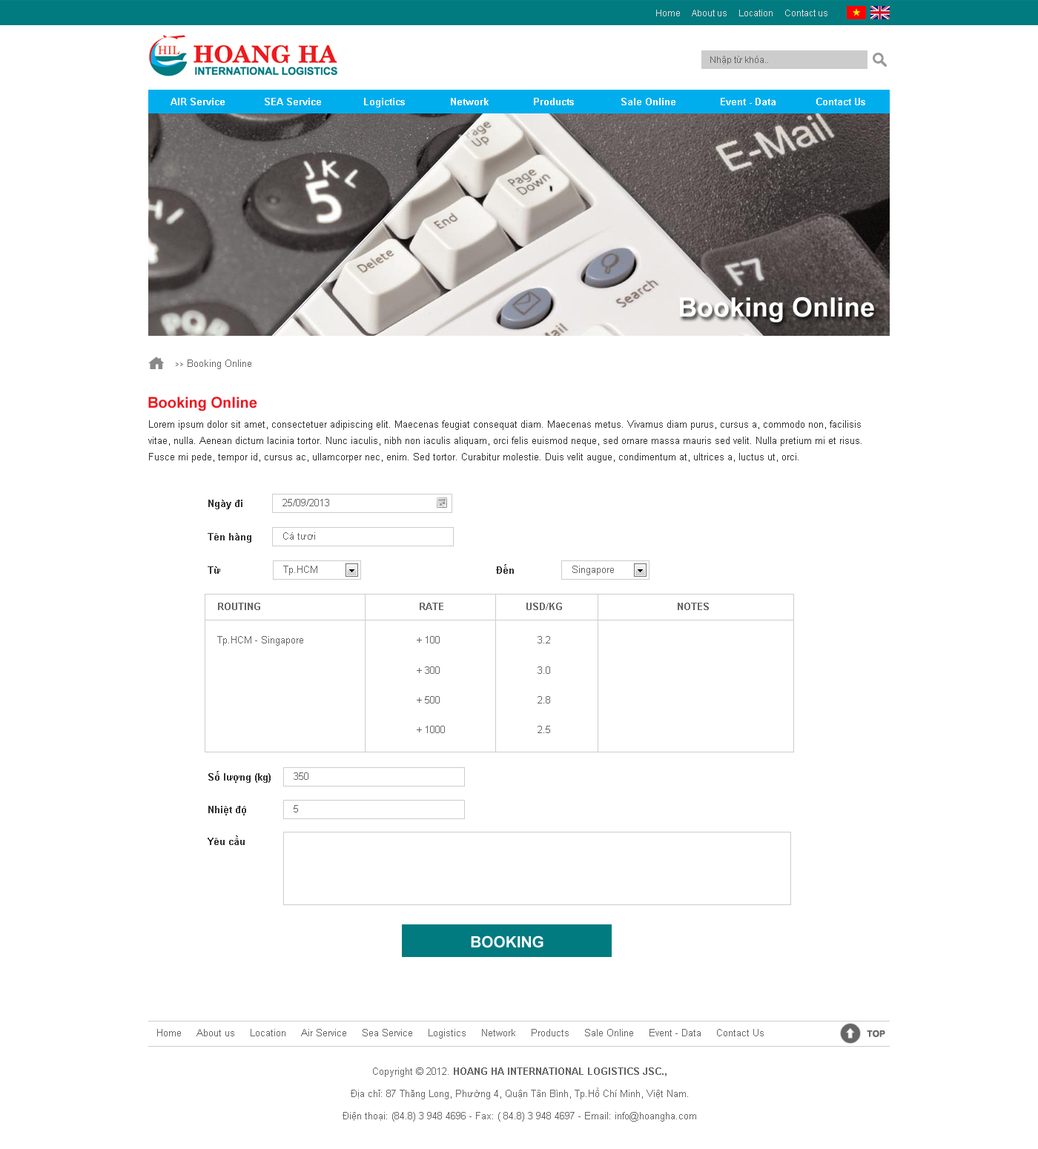
<style>
.page{position:relative;width:1038px;height:1149px;background:#ffffff}
.page>*{position:absolute;margin:0}
.t1{font:8.9px "ArialMT";color:#dddddd}
.t2{font:8.9px "ArialMT";color:#666666}
.t3{font:9.6px "Arial-BoldMT";color:#ffffff}
.t4{font:26.7px "Arial-BoldMT";color:#ffffff}
.t5{font:9.6px "ArialMT";color:#666666}
.t6{font:7.4px "ArialMT";color:#666666}
.t7{font:14.8px "Arial-BoldMT";color:#ed1721}
.t8{font:9.6px/16.3px "ArialMT";color:#333333}
.t9{font:9.6px "Arial-BoldMT";color:#333333}
.t10{font:9.6px "Arial-BoldMT";color:#666666}
.t11{font:15.4px "Arial-BoldMT";color:#ffffff}
.t12{font:9.6px/14.8px "ArialMT";color:#666666}
.t13{font:9.6px/14.8px "Arial-BoldMT";color:#666666}
</style>
<div class="page">
<p class="t1" style="left:656px;top:10px;width:171px;height:6px">Home     About us     Location     Contact us</p>
<p class="t2" style="left:710px;top:56px;width:58px;height:8px">Nhập từ khóa..</p>
<p class="t3" style="left:170px;top:98px;width:55px;height:7px">AIR Service</p>
<p class="t3" style="left:265px;top:98px;width:56px;height:7px">SEA Service</p>
<p class="t3" style="left:364px;top:98px;width:41px;height:9px">Logictics</p>
<p class="t3" style="left:451px;top:98px;width:38px;height:7px">Network</p>
<p class="t3" style="left:534px;top:98px;width:40px;height:7px">Products</p>
<p class="t3" style="left:621px;top:98px;width:54px;height:7px">Sale Online</p>
<p class="t3" style="left:721px;top:98px;width:54px;height:7px">Event - Data</p>
<p class="t3" style="left:816px;top:98px;width:49px;height:7px">Contact Us</p>
<p class="t4" style="left:679px;top:297px;width:195px;height:25px">Booking Online</p>
<p class="t5" style="left:176px;top:360px;width:75px;height:9px"><span class="t6">&gt;&gt;</span> Booking Online</p>
<p class="t7" style="left:148px;top:397px;width:109px;height:14px">Booking Online</p>
<p class="t8" style="left:148px;top:420px;width:713px;height:43px">Lorem ipsum dolor sit amet, consectetuer adipiscing elit. Maecenas feugiat consequat diam. Maecenas metus. Vivamus diam purus, cursus a, commodo non, facilisis vitae, nulla. Aenean dictum lacinia tortor. Nunc iaculis, nibh non iaculis aliquam, orci felis euismod neque, sed ornare massa mauris sed velit. Nulla pretium mi et risus. Fusce mi pede, tempor id, cursus ac, ullamcorper nec, enim. Sed tortor. Curabitur molestie. Duis velit augue, condimentum at, ultrices a, luctus ut, orci.</p>
<p class="t9" style="left:208px;top:500px;width:34px;height:9px">Ngày đi</p>
<p class="t5" style="left:282px;top:499px;width:47px;height:7px">25/09/2013</p>
<p class="t9" style="left:208px;top:533px;width:43px;height:10px">Tên hàng</p>
<p class="t5" style="left:283px;top:532px;width:32px;height:8px">Cá tươi</p>
<p class="t9" style="left:208px;top:566px;width:12px;height:8px">Từ</p>
<p class="t5" style="left:283px;top:566px;width:34px;height:9px">Tp.HCM</p>
<p class="t9" style="left:496px;top:564px;width:18px;height:10px">Đến</p>
<p class="t5" style="left:572px;top:566px;width:42px;height:9px">Singapore</p>
<p class="t10" style="left:218px;top:603px;width:491px;height:7px">ROUTING           RATE        USD/KG       NOTES</p>
<p class="t5" style="left:217px;top:636px;width:333px;height:10px">Tp.HCM - Singapore        + 100    3.2</p>
<p class="t5" style="left:417px;top:666px;width:133px;height:8px">+ 300    3.0</p>
<p class="t5" style="left:417px;top:696px;width:133px;height:7px">+ 500    2.8</p>
<p class="t5" style="left:417px;top:726px;width:133px;height:7px">+ 1000    2.5</p>
<p class="t9" style="left:208px;top:771px;width:63px;height:12px">Số lượng (kg)</p>
<p class="t5" style="left:294px;top:772px;width:14px;height:8px">350</p>
<p class="t9" style="left:208px;top:806px;width:38px;height:9px">Nhiệt độ</p>
<p class="t5" style="left:294px;top:805px;width:4px;height:7px">5</p>
<p class="t9" style="left:208px;top:835px;width:37px;height:10px">Yêu cầu</p>
<p class="t11" style="left:471px;top:936px;width:72px;height:12px">BOOKING</p>
<p class="t5" style="left:157px;top:1029px;width:607px;height:10px">Home     About us     Location     Air Service     Sea Service     Logistics     Network     Products     Sale Online     Event - Data     Contact Us</p>
<p class="t12" style="left:342px;top:1067px;width:354px;height:55px;text-align:center">Copyright © 2012. <span class="t13">HOANG HA INTERNATIONAL LOGISTICS JSC.,<br></span>Địa chỉ: 87 Thăng Long, Phường 4, Quận Tân Bình, Tp.Hồ Chí Minh, Việt Nam.<br>Điện thoại: (84.8) 3 948 4696 - Fax: ( 84.8) 3 948 4697 - Email: info@hoangha.com</p>
</div>
